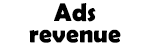
<style>
.page{position:relative;width:159px;height:50px;background:#ffffff}
.page>*{position:absolute;margin:0}
.t1{font:25.3px/21.3px "BerlinSansFBDemi-Bold";color:#000000}
</style>
<div class="page">
<p class="t1" style="left:29px;top:3px;width:92px;height:40px;text-align:center">Ads<br>revenue</p>
</div>
